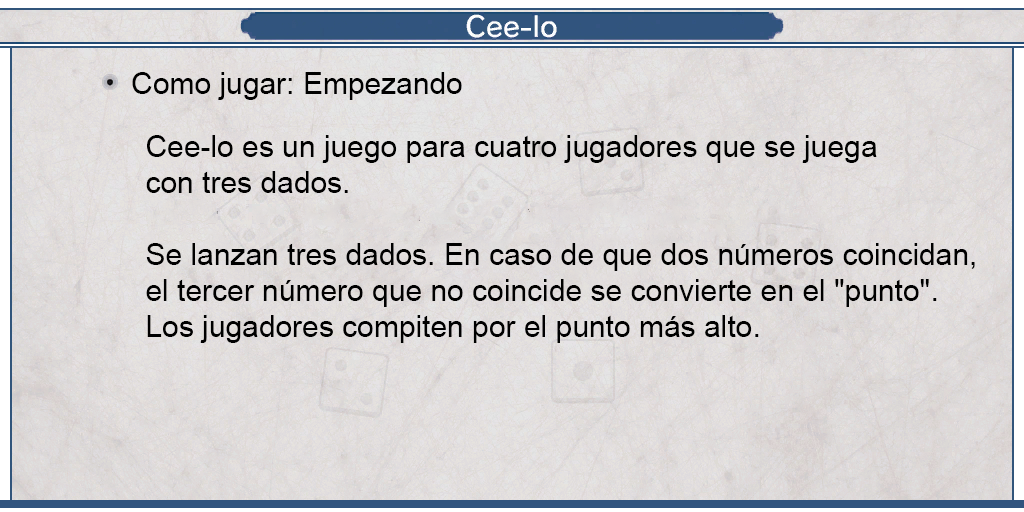
<style>
.page{position:relative;width:1024px;height:512px}
.page>*{position:absolute;margin:0}
.t1{font:29.8px "ArialMT";color:#000000}
.t2{font:30px "ArialMT";color:#000000}
</style>
<div class="page">
<p class="t1" style="left:132px;top:72px;width:330px;height:28px">Como jugar: Empezando</p>
<p class="t2" style="left:146px;top:135px;width:829px;height:208px;text-align:justify">Cee-lo es un juego para cuatro jugadores que se juega<br>con tres dados.<br><br>Se lanzan tres dados. En caso de que dos números coincidan,<br>el tercer número que no coincide se convierte en el "punto".<br>Los jugadores compiten por el punto más alto.</p>
</div>
